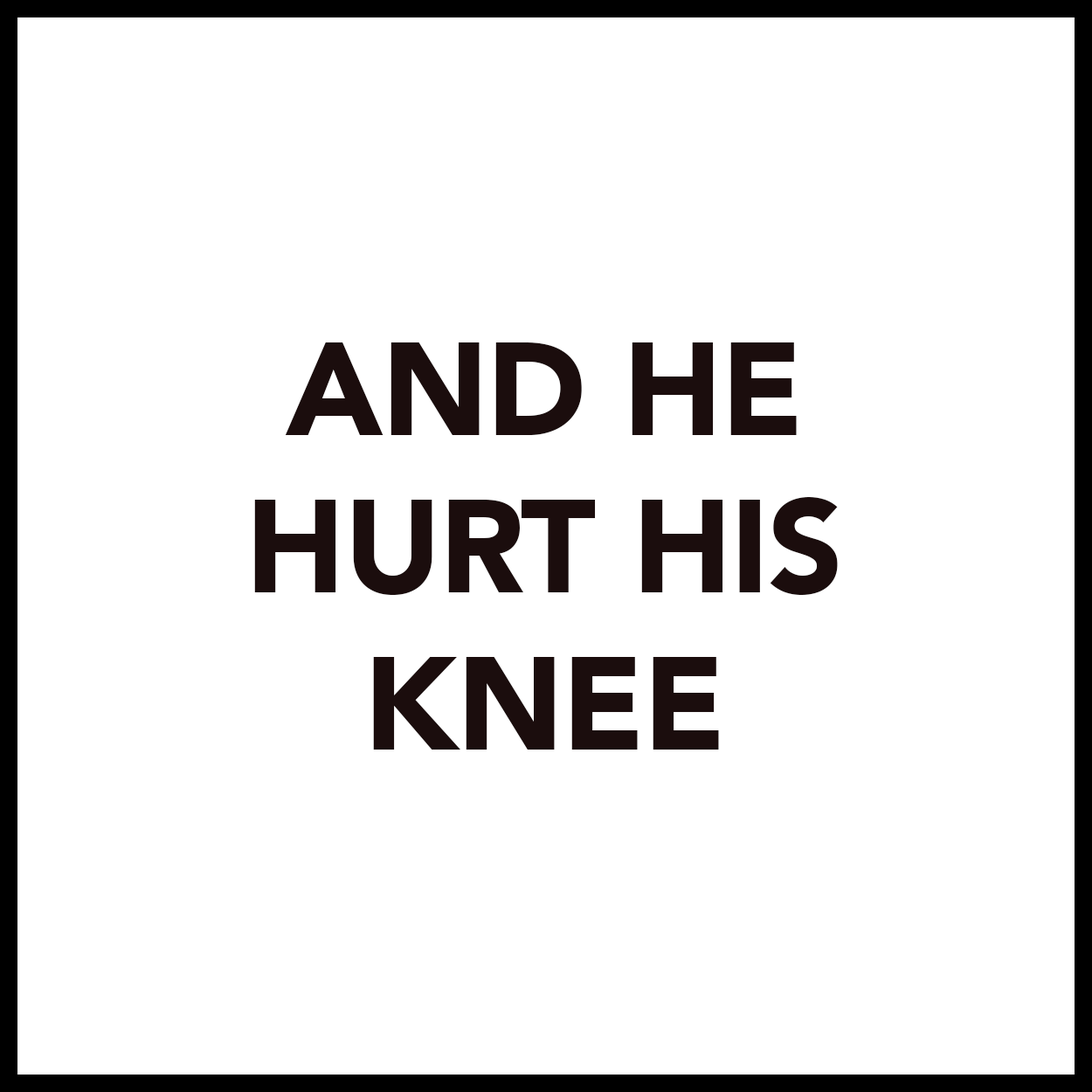
<style>
.page{position:relative;width:1092px;height:1092px;background:#ffffff}
.page>*{position:absolute;margin:0}
.t1{font:131px "Avenir-Black";letter-spacing:-0.01em;color:#1b0d0d}
</style>
<div class="page">
<p class="t1" style="left:254px;top:342px;width:584px;height:408px;text-align:center">AND HE<br> HURT HIS <br>KNEE</p>
</div>
